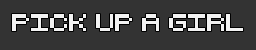
<style>
.page{position:relative;width:256px;height:50px;background:#333333}
.page>*{position:absolute;margin:0}
.t1{font:23.5px "RetroComputer";color:#f2f2f2}
</style>
<div class="page">
<p class="t1" style="left:12px;top:14px;width:231px;height:17px">PICK UP A GIRL</p>
</div>
